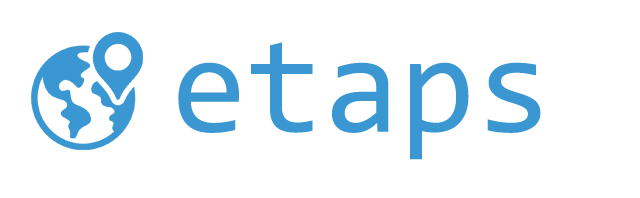
<style>
.page{position:relative;width:640px;height:198px;background:#ffffff}
.page>*{position:absolute;margin:0}
.t1{font:137.7px "Consolas";color:#3a97d2}
</style>
<div class="page">
<p class="t1" style="left:178px;top:42px;width:363px;height:118px">etaps</p>
</div>
